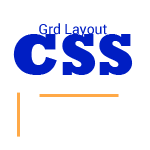
<style>
.page{position:relative;width:150px;height:150px;background:#ffffff}
.page>*{position:absolute;margin:0}
.t1{font:14px "Roboto-Regular";color:#001ec3}
.t2{font:60px "Rockwell-ExtraBold";color:#001ec3}
</style>
<div class="page">
<p class="t1" style="left:39px;top:23px;width:68px;height:14px">Grd Layout</p>
<p class="t2" style="left:13px;top:34px;width:120px;height:41px">CSS</p>
</div>
